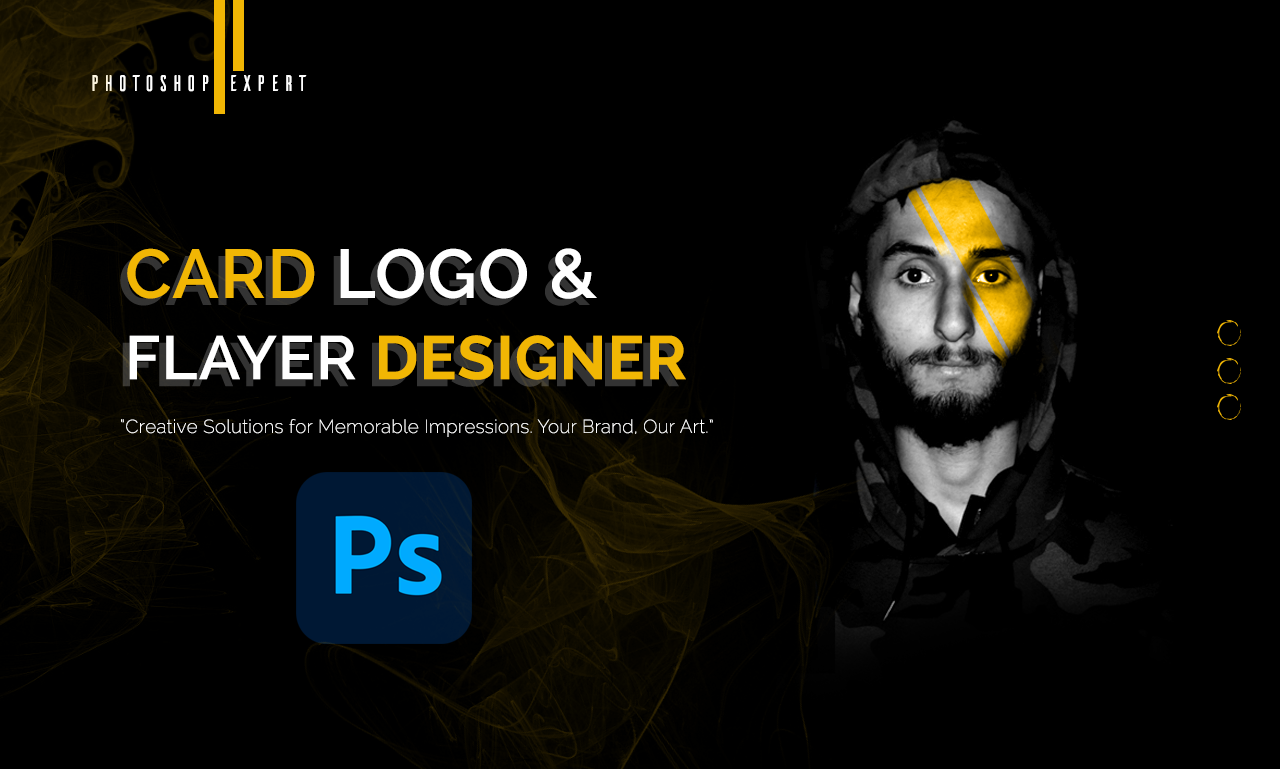
<style>
.page{position:relative;width:1280px;height:769px;background:#000000}
.page>*{position:absolute;margin:0}
.t1{font:22.5px "Ailerons-Regular";letter-spacing:0.02em;color:#fefefe}
.t2{font:61.2px/81.2px "Raleway-Bold";letter-spacing:0.02em;color:#f1b604}
.t3{font:68.8px/81.2px "Raleway-SemiBold";letter-spacing:0.02em;color:#f1b604}
.t4{font:68.8px/81.2px "Raleway-SemiBold";letter-spacing:0.02em;color:#ffffff}
.t5{font:61.2px/81.2px "Raleway-SemiBold";letter-spacing:0.02em;color:#ffffff}
.t6{font:18.8px "Raleway-ExtraLight";letter-spacing:0.016em;color:#fefefe}
</style>
<div class="page">
<p class="t1" style="left:92px;top:75px;width:215px;height:17px">PHOTOSHOP eXPERT</p>
<p class="t2" style="left:127px;top:248px;width:559px;height:132px"><span class="t3">CARD </span><span class="t4">LOGO &amp;<br></span><span class="t5">FLAYER </span>DESIGNER</p>
<p class="t6" style="left:121px;top:419px;width:592px;height:18px">“Creative Solutions for Memorable Impressions. Your Brand, Our Art.”</p>
</div>
